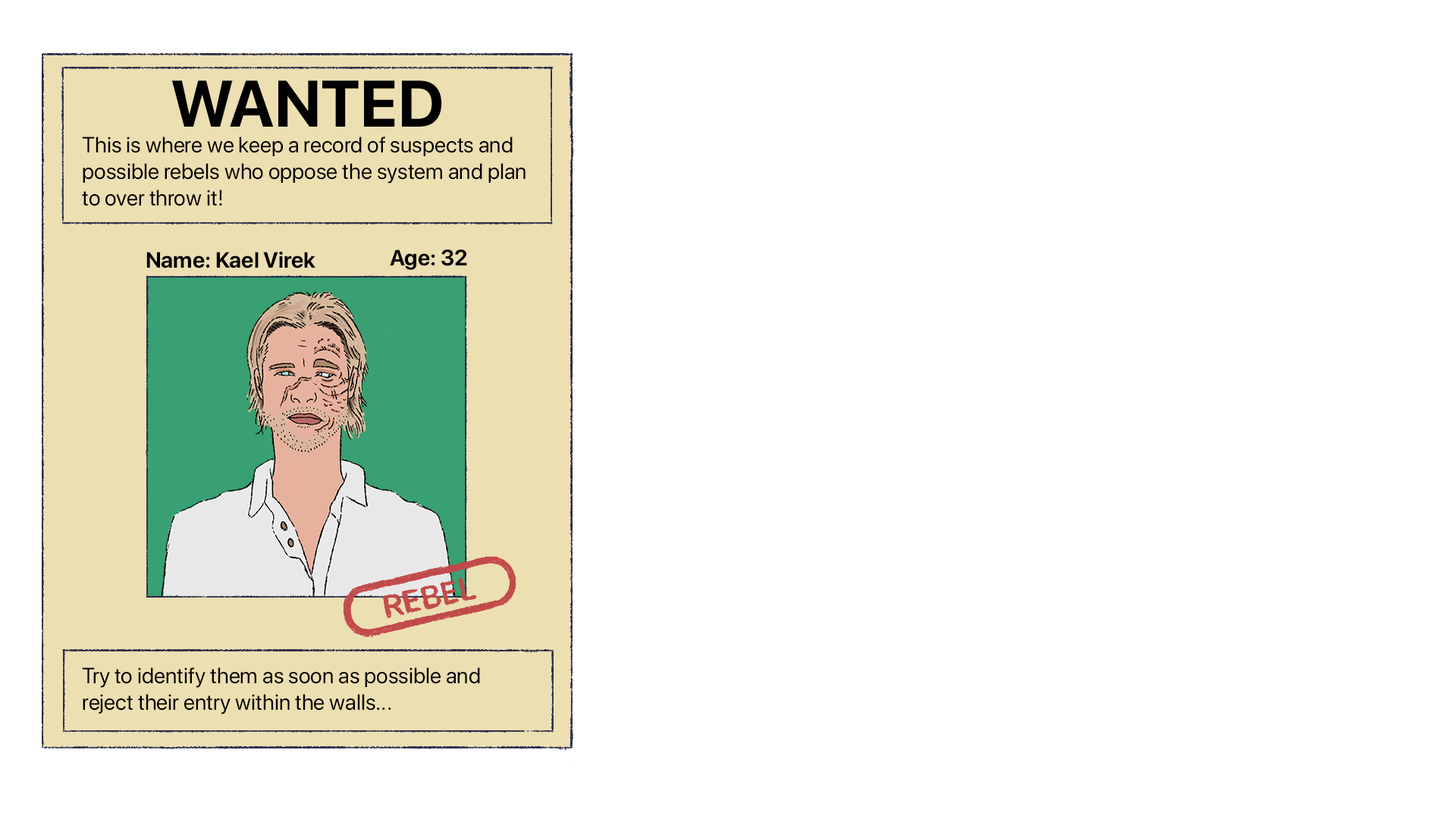
<style>
.page{position:relative;width:1456px;height:819px;background:#ffffff}
.page>*{position:absolute;margin:0}
.t1{font:65.4px "SFProDisplay-Bold";color:#000000}
.t2{font:22.1px "SFProDisplay-Regular";color:#000000}
.t3{font:22.1px "SFProDisplay-Bold";color:#000000}
</style>
<div class="page">
<p class="t1" style="left:171px;top:80px;width:271px;height:47px">WANTED</p>
<p class="t2" style="left:82px;top:136px;width:444px;height:578px">This is where we keep a record of suspects and possible rebels who oppose the system and plan to over throw it!<br><br><br><br><br><br><br><br><br><br><br><br><br><br><br><br><br><br>Try to identify them as soon as possible and reject their entry within the walls...</p>
<p class="t3" style="left:146px;top:251px;width:169px;height:17px">Name: Kael Virek</p>
<p class="t3" style="left:390px;top:249px;width:77px;height:21px">Age: 32</p>
</div>
